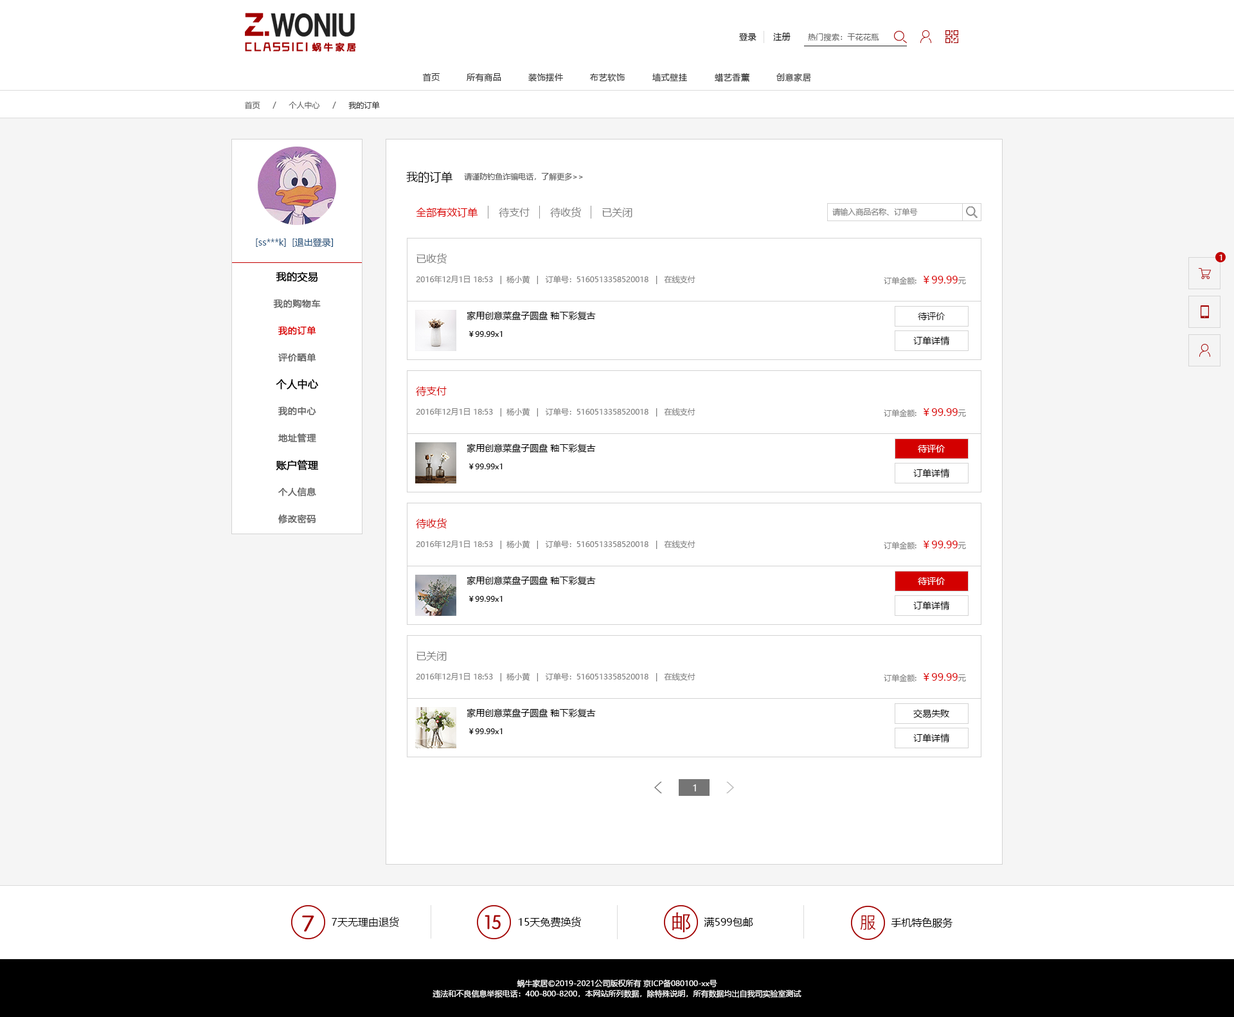
<style>
.page{position:relative;width:1234px;height:1017px;background:#ffffff}
.page>*{position:absolute;margin:0}
.t1{font:8.4px "MicrosoftYaHei";letter-spacing:0.05em;color:#000000}
.t2{font:7.7px "MicrosoftYaHei";letter-spacing:0.025em;color:#686868}
.t3{font:8.4px "MicrosoftYaHei";letter-spacing:0.05em;color:#333333}
.t4{font:7.7px "MicrosoftYaHei";color:#666666}
.t5{font:7.7px "MicrosoftYaHei";color:#333333}
.t6{font:11.6px "MicrosoftYaHei";color:#000000}
.t7{font:7.7px "MicrosoftYaHei";color:#5c5c5c}
.t8{font:10.3px "MicrosoftYaHei";color:#db0000}
.t9{font:10.3px "MicrosoftYaHei";color:#808080}
.t10{font:7.7px "MicrosoftYaHei";color:#808080}
.t11{font:9px "MicrosoftYaHei";color:#23527c}
.t12{font:7.7px "MicrosoftYaHei";letter-spacing:0.025em;color:#ffffff}
.t13{font:10.3px "MicrosoftYaHei";color:#000000;font-weight:bold}
.t14{font:9px "MicrosoftYaHei";letter-spacing:0.025em;color:#626262;font-weight:bold}
.t15{font:9px "MicrosoftYaHei";color:#000000}
.t16{font:9px "MicrosoftYaHei";letter-spacing:0.025em;color:#db0000;font-weight:bold}
.t17{font:7.7px "MicrosoftYaHei";color:#000000}
.t18{font:10.3px "MicrosoftYaHei";color:#d30000}
.t19{font:9px "MicrosoftYaHei";color:#ffffff}
.t20{font:10.3px "MicrosoftYaHei";color:#000000}
.t21{font:7.7px/10.3px "MicrosoftYaHei";color:#ffffff}
</style>
<div class="page">
<p class="t1" style="left:739px;top:33px;width:18px;height:8px">登录</p>
<p class="t1" style="left:773px;top:33px;width:18px;height:8px">注册</p>
<p class="t2" style="left:808px;top:33px;width:71px;height:8px">热门搜索：干花花瓶</p>
<p class="t3" style="left:422px;top:73px;width:18px;height:9px">首页</p>
<p class="t3" style="left:467px;top:73px;width:34px;height:9px">所有商品</p>
<p class="t3" style="left:528px;top:73px;width:35px;height:9px">装饰摆件</p>
<p class="t3" style="left:590px;top:73px;width:35px;height:9px">布艺软饰</p>
<p class="t3" style="left:652px;top:73px;width:35px;height:9px">墙式壁挂</p>
<p class="t3" style="left:715px;top:73px;width:35px;height:9px">蜡艺香薰</p>
<p class="t3" style="left:777px;top:73px;width:34px;height:9px">创意家居</p>
<p class="t4" style="left:244px;top:102px;width:16px;height:7px">首页</p>
<p class="t4" style="left:273px;top:102px;width:3px;height:7px">/</p>
<p class="t4" style="left:289px;top:102px;width:31px;height:7px">个人中心</p>
<p class="t4" style="left:332px;top:102px;width:4px;height:7px">/</p>
<p class="t5" style="left:348px;top:101px;width:32px;height:8px">我的订单</p>
<p class="t6" style="left:406px;top:172px;width:47px;height:11px">我的订单</p>
<p class="t7" style="left:464px;top:172px;width:119px;height:9px">请谨防钓鱼诈骗电话，了解更多&gt;&gt;</p>
<p class="t8" style="left:416px;top:208px;width:62px;height:9px">全部有效订单</p>
<p class="t9" style="left:499px;top:208px;width:31px;height:9px">待支付</p>
<p class="t9" style="left:550px;top:207px;width:31px;height:10px">待收货</p>
<p class="t9" style="left:602px;top:208px;width:31px;height:9px">已关闭</p>
<p class="t10" style="left:833px;top:208px;width:85px;height:8px">请输入商品名称、订单号</p>
<p class="t11" style="left:256px;top:239px;width:30px;height:8px">[ss***k]</p>
<p class="t11" style="left:292px;top:238px;width:42px;height:9px">[退出登录]</p>
<p class="t9" style="left:417px;top:253px;width:30px;height:11px">已收货</p>
<p class="t12" style="left:1220px;top:255px;width:3px;height:5px">1</p>
<p class="t13" style="left:276px;top:272px;width:42px;height:10px">我的交易</p>
<p class="t10" style="left:416px;top:275px;width:280px;height:9px">2016年12月1日 18:53   |  杨小黄   |   订单号：5160513358520018   |   在线支付</p>
<p class="t8" style="left:884px;top:276px;width:82px;height:9px"><span class="t10">订单金额:  </span>￥99.99<span class="t10">元</span></p>
<p class="t14" style="left:273px;top:299px;width:48px;height:10px">我的购物车</p>
<p class="t15" style="left:467px;top:311px;width:129px;height:10px">家用创意菜盘子圆盘 釉下彩复古</p>
<p class="t15" style="left:918px;top:312px;width:27px;height:8px">待评价</p>
<p class="t16" style="left:278px;top:326px;width:38px;height:10px">我的订单</p>
<p class="t17" style="left:469px;top:331px;width:34px;height:6px">￥99.99x1</p>
<p class="t15" style="left:914px;top:336px;width:36px;height:9px">订单详情</p>
<p class="t14" style="left:278px;top:353px;width:38px;height:9px">评价晒单</p>
<p class="t13" style="left:276px;top:379px;width:43px;height:11px">个人中心</p>
<p class="t18" style="left:416px;top:386px;width:31px;height:10px">待支付</p>
<p class="t14" style="left:278px;top:406px;width:38px;height:10px">我的中心</p>
<p class="t10" style="left:416px;top:408px;width:280px;height:9px">2016年12月1日 18:53   |  杨小黄   |   订单号：5160513358520018   |   在线支付</p>
<p class="t8" style="left:884px;top:408px;width:82px;height:9px"><span class="t10">订单金额:  </span>￥99.99<span class="t10">元</span></p>
<p class="t14" style="left:278px;top:433px;width:38px;height:10px">地址管理</p>
<p class="t15" style="left:467px;top:444px;width:129px;height:9px">家用创意菜盘子圆盘 釉下彩复古</p>
<p class="t19" style="left:918px;top:445px;width:27px;height:8px">待评价</p>
<p class="t13" style="left:276px;top:460px;width:43px;height:11px">账户管理</p>
<p class="t17" style="left:469px;top:464px;width:34px;height:5px">￥99.99x1</p>
<p class="t15" style="left:914px;top:469px;width:36px;height:9px">订单详情</p>
<p class="t14" style="left:278px;top:487px;width:38px;height:10px">个人信息</p>
<p class="t14" style="left:278px;top:514px;width:38px;height:10px">修改密码</p>
<p class="t18" style="left:416px;top:518px;width:31px;height:10px">待收货</p>
<p class="t10" style="left:416px;top:540px;width:280px;height:9px">2016年12月1日 18:53   |  杨小黄   |   订单号：5160513358520018   |   在线支付</p>
<p class="t8" style="left:884px;top:541px;width:82px;height:9px"><span class="t10">订单金额:  </span>￥99.99<span class="t10">元</span></p>
<p class="t15" style="left:467px;top:576px;width:129px;height:10px">家用创意菜盘子圆盘 釉下彩复古</p>
<p class="t19" style="left:918px;top:577px;width:27px;height:8px">待评价</p>
<p class="t17" style="left:469px;top:596px;width:34px;height:6px">￥99.99x1</p>
<p class="t15" style="left:914px;top:601px;width:36px;height:9px">订单详情</p>
<p class="t9" style="left:417px;top:651px;width:30px;height:10px">已关闭</p>
<p class="t10" style="left:416px;top:672px;width:280px;height:9px">2016年12月1日 18:53   |  杨小黄   |   订单号：5160513358520018   |   在线支付</p>
<p class="t8" style="left:884px;top:673px;width:82px;height:9px"><span class="t10">订单金额:  </span>￥99.99<span class="t10">元</span></p>
<p class="t15" style="left:467px;top:708px;width:129px;height:10px">家用创意菜盘子圆盘 釉下彩复古</p>
<p class="t15" style="left:914px;top:709px;width:36px;height:9px">交易失败</p>
<p class="t17" style="left:469px;top:728px;width:34px;height:6px">￥99.99x1</p>
<p class="t15" style="left:914px;top:734px;width:36px;height:8px">订单详情</p>
<p class="t19" style="left:693px;top:784px;width:3px;height:7px">1</p>
<p class="t20" style="left:332px;top:917px;width:67px;height:10px">7天无理由退货</p>
<p class="t20" style="left:519px;top:917px;width:62px;height:11px">15天免费换货</p>
<p class="t20" style="left:704px;top:917px;width:49px;height:10px">满599包邮</p>
<p class="t20" style="left:891px;top:917px;width:62px;height:11px">手机特色服务</p>
<p class="t21" style="left:433px;top:979px;width:369px;height:19px;text-align:center">蜗牛家居©2019-2021公司版权所有 京ICP备080100-xx号<br>违法和不良信息举报电话：400-800-8200，本网站所列数据，除特殊说明，所有数据均出自我司实验室测试</p>
</div>
